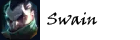
<style>
.page{position:relative;width:140px;height:40px;background:#ffffff}
.page>*{position:absolute;margin:0}
.t1{font:12px "VinerHandITC";color:#000000}
</style>
<div class="page">
<p class="t1" style="left:47px;top:12px;width:51px;height:14px">Swain</p>
</div>
